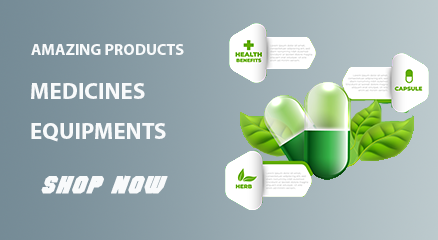
<style>
.page{position:relative;width:438px;height:240px}
.page>*{position:absolute;margin:0}
.t1{font:16px "MyriadPro-Bold";color:#f8fafb;text-transform:uppercase}
.t2{font:23px/40px "MyriadPro-Bold";color:#f8fafb;text-transform:uppercase}
.t3{font:23px "ActionForceNormal";color:#f8fafb;text-transform:uppercase;font-weight:bold}
</style>
<div class="page">
<p class="t1" style="left:31px;top:44px;width:153px;height:11px">AMAZING PRODUCTS</p>
<p class="t2" style="left:31px;top:83px;width:135px;height:59px">Medicines<br>Equipments</p>
<p class="t3" style="left:41px;top:175px;width:127px;height:19px">Shop now</p>
</div>
